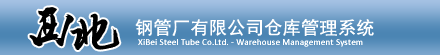
<style>
.page{position:relative;width:440px;height:55px}
.page>*{position:absolute;margin:0}
.t1{font:18px "SimHei";letter-spacing:0.025em;color:#ffffff}
.t2{font:9px "Calibri";letter-spacing:0.025em;color:#ffffff}
</style>
<div class="page">
<p class="t1" style="left:135px;top:19px;width:239px;height:17px">钢管厂有限公司仓库管理系统</p>
<p class="t2" style="left:138px;top:39px;width:225px;height:8px">XiBei Steel Tube Co.Ltd. - Warehouse Management System</p>
</div>
